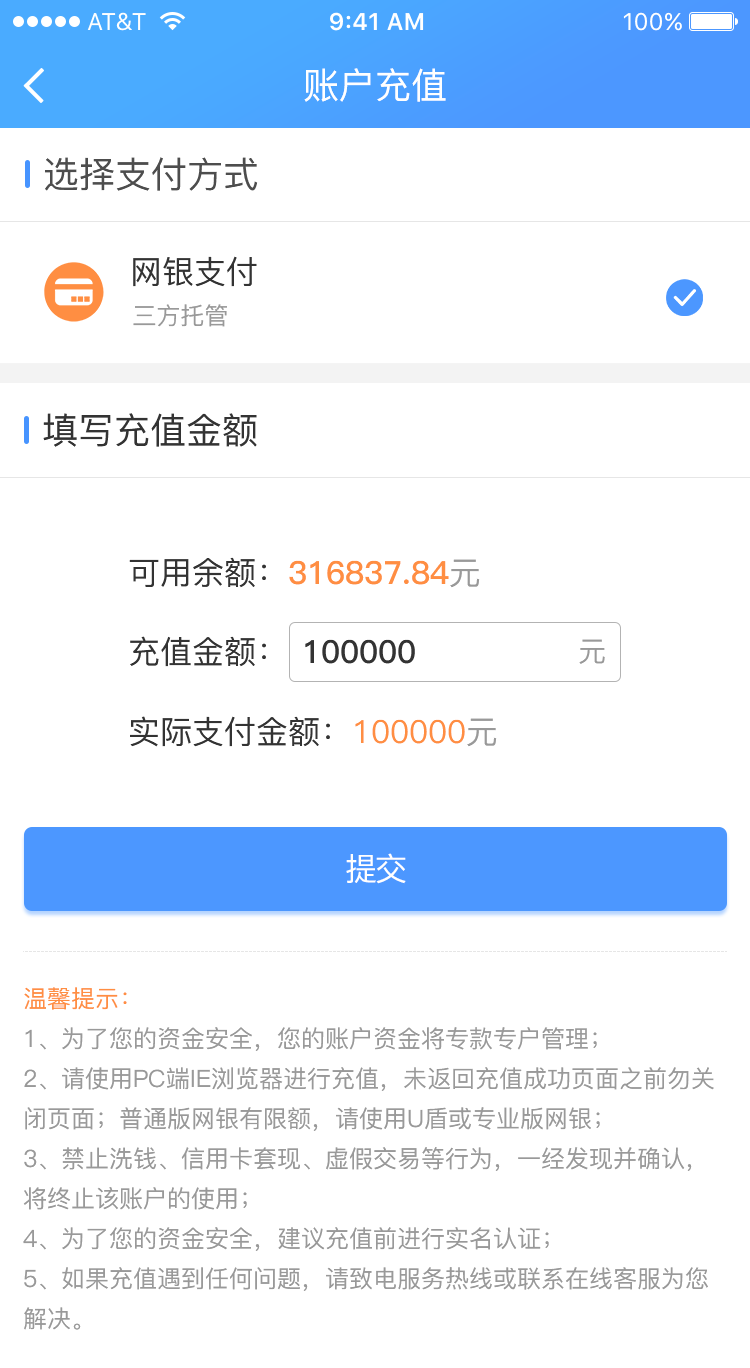
<style>
.page{position:relative;width:750px;height:1368px;background:#ffffff}
.page>*{position:absolute;margin:0}
.t1{font:36px "PingFang-SC-Medium";color:#ffffff}
.t2{font:36px "PingFang-SC-Medium";color:#4d4d4d}
.t3{font:32px "PingFang-SC-Medium";color:#333333}
.t4{font:24px "PingFang-SC-Medium";color:#999999}
.t5{font:36px "PingFang-SC-Medium";color:#333333}
.t6{font:32px "PingFang-SC-Bold";color:#ff8e42}
.t7{font:32px "PingFang-SC-Medium";color:#999999}
.t8{font:32px "PingFang-SC-Bold";color:#333333}
.t9{font:28px "PingFang-SC-Medium";color:#999999}
.t10{font:32px "PingFang-SC-Medium";color:#ff8e42}
.t11{font:32px "PingFang-SC-Medium";letter-spacing:-0.06em;color:#ffffff}
.t12{font:24px/40px "PingFang-SC-Medium";color:#999999}
.t13{font:24px/40px "PingFang-SC-Medium";color:#ff8e42}
</style>
<div class="page">
<p class="t1" style="left:304px;top:68px;width:142px;height:34px">账户充值</p>
<p class="t2" style="left:45px;top:157px;width:213px;height:34px">选择支付方式</p>
<p class="t3" style="left:133px;top:256px;width:124px;height:31px">网银支付</p>
<p class="t4" style="left:133px;top:304px;width:94px;height:23px">三方托管</p>
<p class="t5" style="left:43px;top:413px;width:214px;height:34px">填写充值金额</p>
<p class="t6" style="left:129px;top:557px;width:351px;height:31px"><span class="t3">可用余额：</span>316837.84<span class="t7">元</span></p>
<p class="t3" style="left:130px;top:636px;width:136px;height:31px">充值金额：</p>
<p class="t8" style="left:305px;top:639px;width:110px;height:25px">100000</p>
<p class="t9" style="left:579px;top:639px;width:26px;height:25px">元</p>
<p class="t3" style="left:130px;top:716px;width:367px;height:31px">实际支付金额：<span class="t10">100000</span><span class="t7">元</span></p>
<p class="t11" style="left:346px;top:853px;width:60px;height:31px">提交</p>
<p class="t12" style="left:23px;top:987px;width:691px;height:343px"><span class="t13">温馨提示：</span><br>1、为了您的资金安全，您的账户资金将专款专户管理；<br>2、请使用PC端IE浏览器进行充值，未返回充值成功页面之前勿关            闭页面；普通版网银有限额，请使用U盾或专业版网银；<br>3、禁止洗钱、信用卡套现、虚假交易等行为，一经发现并确认， 将终止该账户的使用；<br>4、为了您的资金安全，建议充值前进行实名认证；<br>5、如果充值遇到任何问题，请致电服务热线或联系在线客服为您解决。</p>
</div>
